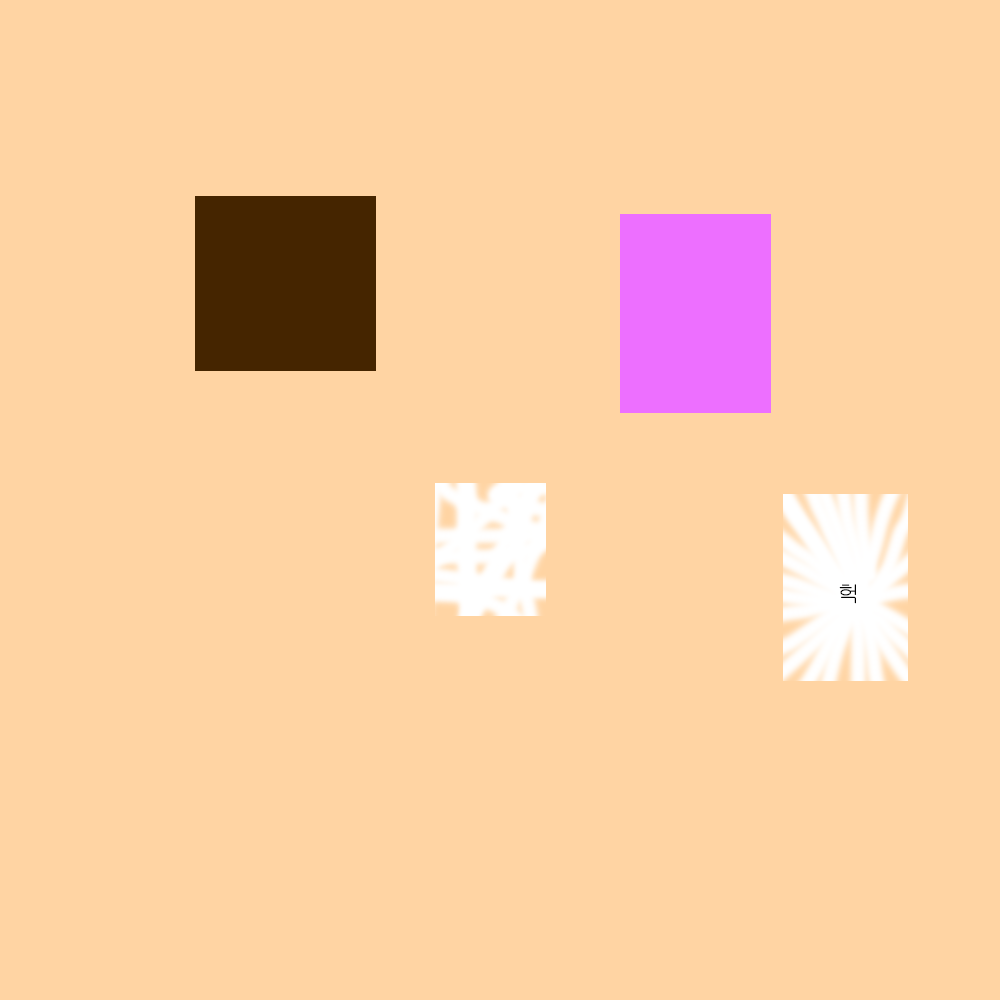
<style>
.page{position:relative;width:1000px;height:1000px;background:#ffd4a3}
.page>*{position:absolute;margin:0}
.t1{font:23.2px "Gulim";letter-spacing:-0.05em;color:#000000}
</style>
<div class="page">
<p class="t1" style="left:839px;top:584px;width:17px;height:20px">헉</p>
</div>
